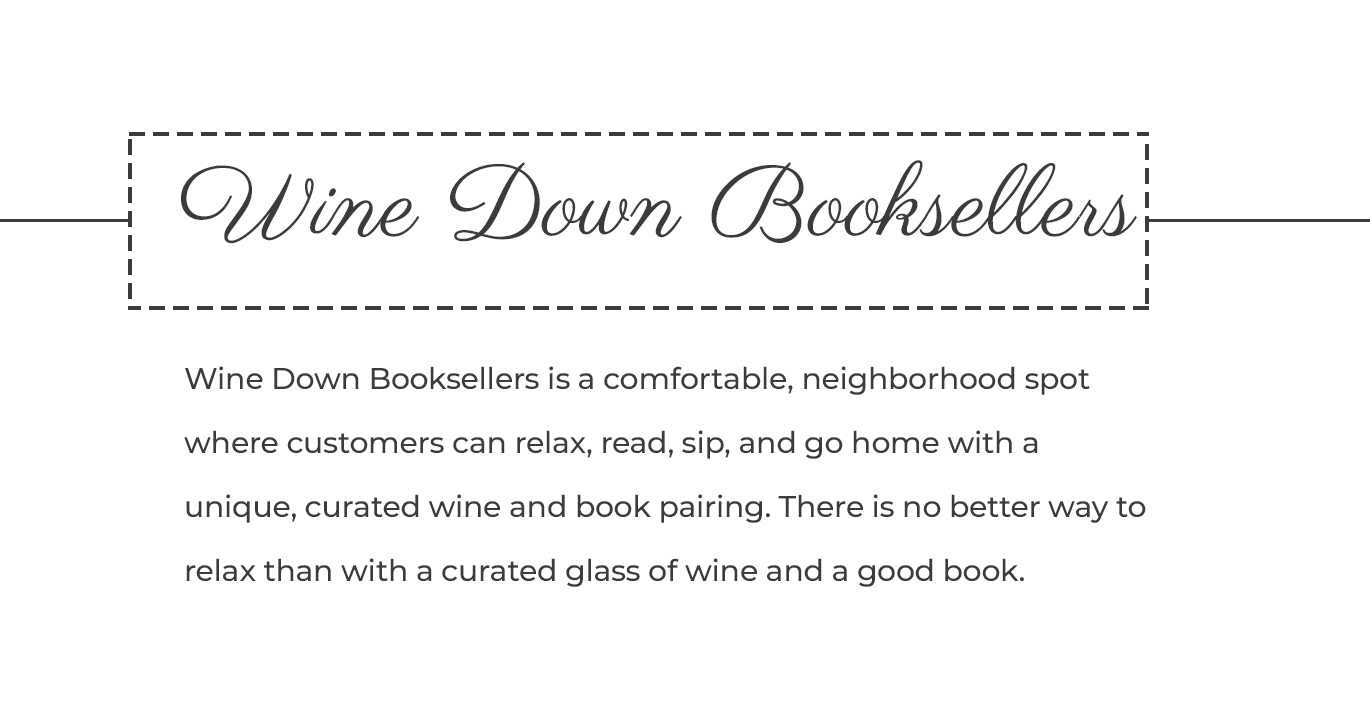
<style>
.page{position:relative;width:1370px;height:712px;background:#ffffff}
.page>*{position:absolute;margin:0}
.t1{font:100px "Parisienne-Regular";color:#3b3b3b}
.t2{font:30px/64px "Montserrat-Medium";letter-spacing:-0.01em;color:#3b3b3b}
</style>
<div class="page">
<p class="t1" style="left:181px;top:160px;width:956px;height:84px">Wine Down Booksellers</p>
<p class="t2" style="left:184px;top:366px;width:962px;height:221px">Wine Down Booksellers is a comfortable, neighborhood spot where customers can relax, read, sip, and go home with a unique, curated wine and book pairing. There is no better way to relax than with a curated glass of wine and a good book.</p>
</div>
